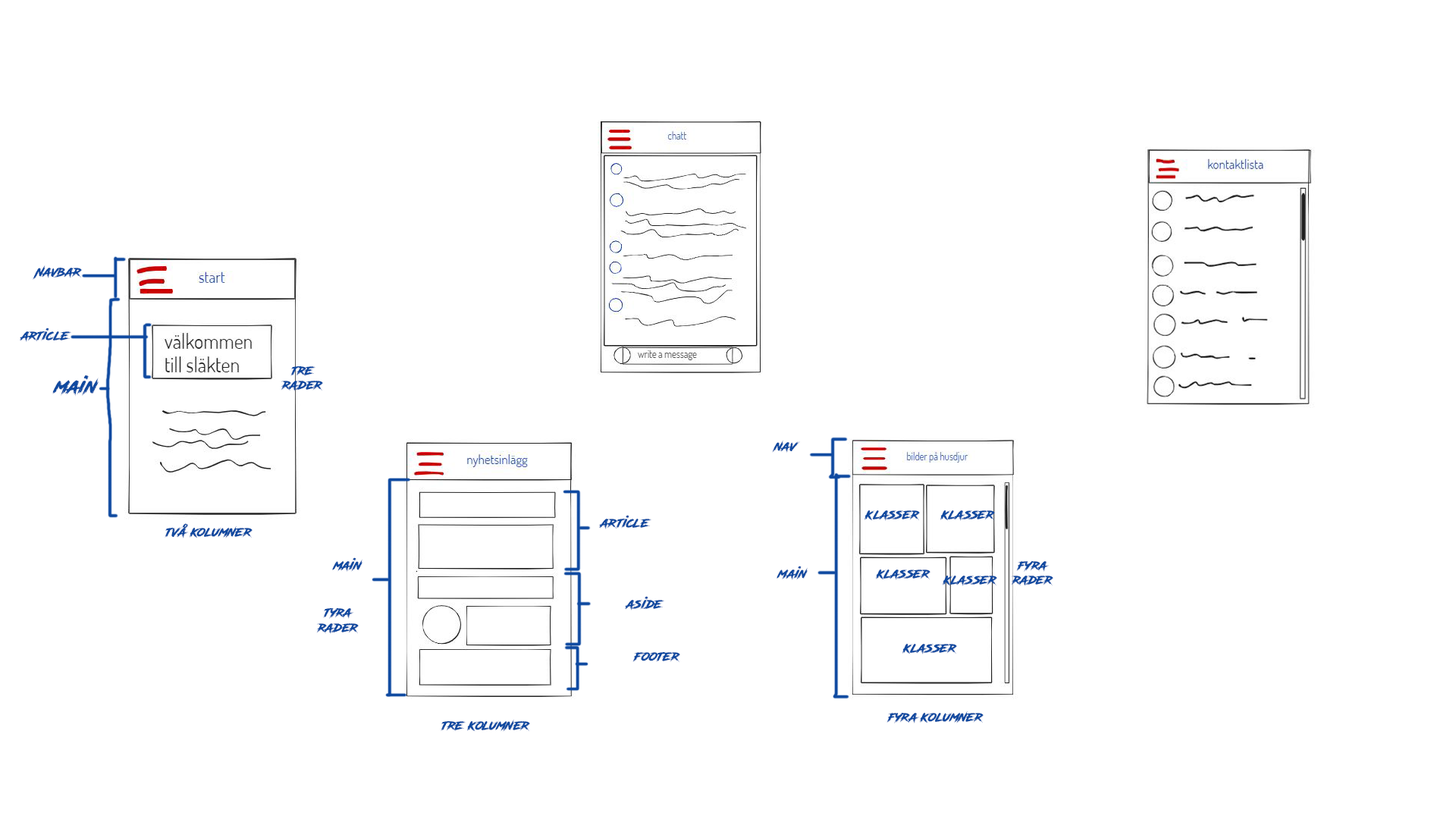
<style>
.page{position:relative;width:1456px;height:819px;background:#ffffff}
.page>*{position:absolute;margin:0}
.t1{font:9.1px "RoadRage";color:#0e49a0}
.t2{font:12.1px "RoadRage";color:#0e49a0}
.t3{font:18.2px "RoadRage";color:#0e49a0}
</style>
<div class="page">
<p class="t1" style="left:33px;top:265px;width:49px;height:15px">Navbar</p>
<p class="t2" style="left:20px;top:328px;width:51px;height:14px">article</p>
<p class="t3" style="left:52px;top:375px;width:47px;height:22px">main</p>
<p class="t1" style="left:281px;top:366px;width:42px;height:25px;text-align:center">tre<br>rader</p>
<p class="t1" style="left:772px;top:440px;width:28px;height:13px">nav</p>
<p class="t1" style="left:864px;top:510px;width:56px;height:11px">klasser</p>
<p class="t1" style="left:940px;top:510px;width:55px;height:11px">klasser</p>
<p class="t1" style="left:599px;top:515px;width:52px;height:14px">article</p>
<p class="t1" style="left:165px;top:523px;width:88px;height:15px">två kolumner</p>
<p class="t1" style="left:332px;top:557px;width:30px;height:15px">main</p>
<p class="t1" style="left:777px;top:566px;width:31px;height:14px">main</p>
<p class="t1" style="left:876px;top:569px;width:54px;height:11px">klasser</p>
<p class="t1" style="left:1011px;top:560px;width:42px;height:26px;text-align:center">fyra rader</p>
<p class="t1" style="left:943px;top:575px;width:54px;height:11px">klasser</p>
<p class="t1" style="left:625px;top:596px;width:39px;height:14px">aside</p>
<p class="t1" style="left:316px;top:607px;width:43px;height:27px;text-align:center">tyra rader</p>
<p class="t1" style="left:632px;top:651px;width:48px;height:12px">footer</p>
<p class="t1" style="left:902px;top:643px;width:55px;height:11px">klasser</p>
<p class="t1" style="left:886px;top:711px;width:98px;height:12px">fyra kolumner</p>
<p class="t1" style="left:441px;top:719px;width:89px;height:13px">tre kolumner</p>
</div>
